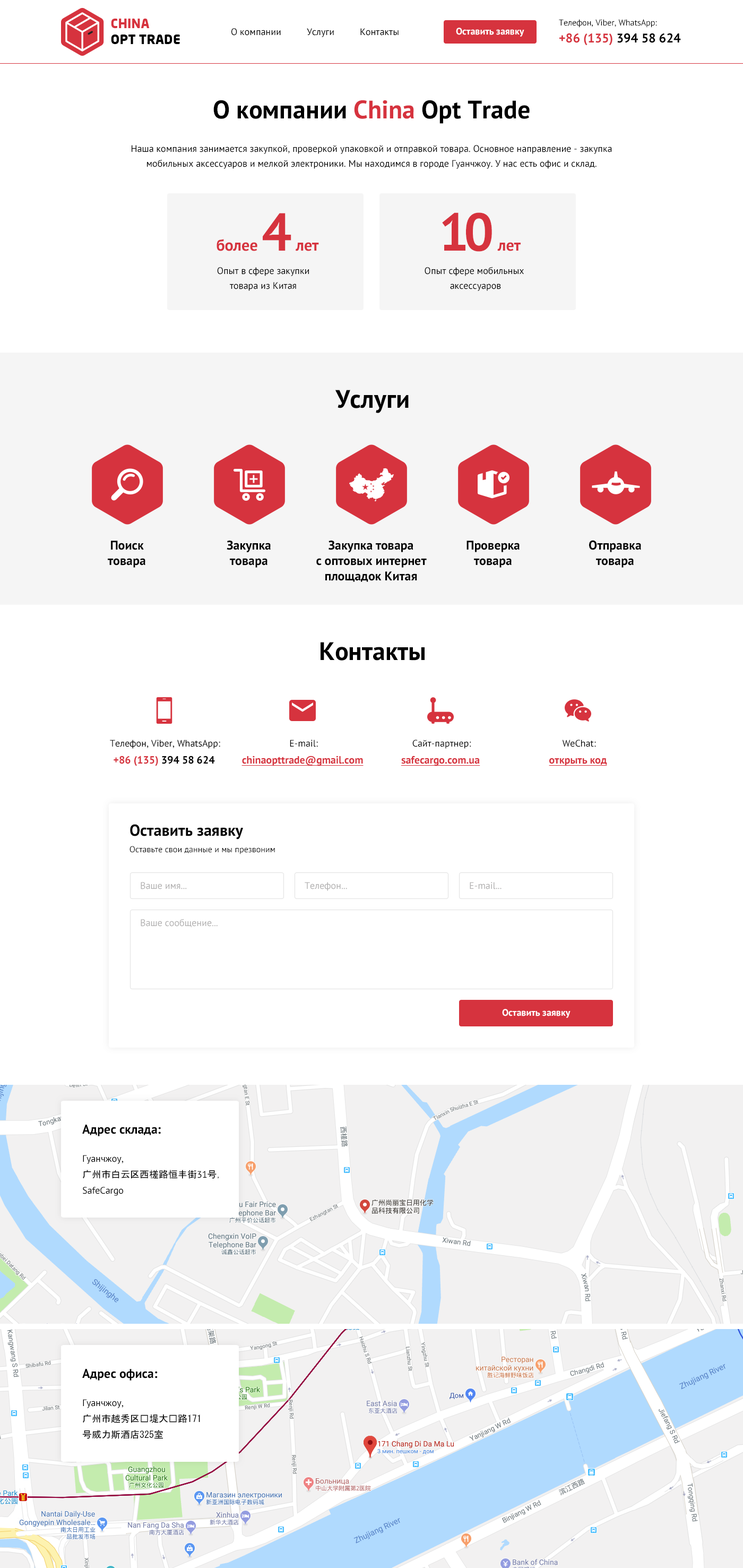
<style>
.page{position:relative;width:743px;height:1568px;background:#ffffff}
.page>*{position:absolute;margin:0}
.t1{font:9.6px "PTSans-Regular";color:#000000}
.t2{font:9.6px "PTSans-Bold";color:#ffffff}
.t3{font:8.5px "PTSans-Regular";color:#000000}
.t4{font:12.7px "PTSans-Bold";color:#000000}
.t5{font:12.7px "PTSans-Bold";color:#d6333e}
.t6{font:25.5px "PTSans-Bold";color:#000000}
.t7{font:25.5px "PTSans-Bold";color:#d6333e}
.t8{font:9.6px/14.9px "PTSans-Regular";color:#010101}
.t9{font:15.9px "PTSans-Bold";color:#d6333e}
.t10{font:53.1px "PTSans-Bold";color:#d6333e}
.t11{font:53.1px "PTSans-Bold";letter-spacing:-0.1em;color:#d6333e}
.t12{font:10.6px "PTSans-Bold";color:#000000}
.t13{font:10.6px "PTSans-Bold";color:#d6333e}
.t14{font:10.6px "PTSans-Bold";color:#d6333e;text-decoration:underline}
.t15{font:15.9px "PTSans-Bold";color:#000000}
.t16{font:8.5px "PTSans-Regular";color:#010101}
.t17{font:9.6px "PTSans-Regular";color:#b1b0b0}
.t18{font:9.6px/15.9px "MS-Gothic";color:#000000}
.t19{font:9.6px/15.9px "PTSans-Regular";color:#000000}
</style>
<div class="page">
<p class="t1" style="left:232px;top:28px;width:167px;height:9px">О компании          Услуги          Контакты</p>
<p class="t2" style="left:456px;top:28px;width:69px;height:9px">Оставить заявку</p>
<p class="t3" style="left:559px;top:19px;width:98px;height:9px">Телефон, Viber, WhatsApp:</p>
<p class="t4" style="left:560px;top:33px;width:121px;height:13px"><span class="t5">+86 (135) </span>394 58 624</p>
<p class="t6" style="left:213px;top:100px;width:317px;height:24px">О компании <span class="t7">China</span> Opt Trade</p>
<p class="t8" style="left:132px;top:145px;width:480px;height:24px;text-align:center">Наша компания занимается закупкой, проверкой упаковкой и отправкой товара. Основное направление - закупка<br>мобильных аксессуаров и мелкой электроники. Мы находимся в городе Гуанчжоу. У нас есть офис и склад.</p>
<p class="t9" style="left:217px;top:213px;width:102px;height:38px">более <span class="t10">4</span> лет</p>
<p class="t9" style="left:442px;top:212px;width:79px;height:40px"><span class="t11">1</span><span class="t10">0</span> лет</p>
<p class="t8" style="left:217px;top:267px;width:92px;height:24px;text-align:center">Опыт в сфере закупки<br>товара из Китая</p>
<p class="t8" style="left:425px;top:267px;width:99px;height:24px;text-align:center">Опыт сфере мобильных <br>аксессуаров</p>
<p class="t6" style="left:335px;top:390px;width:74px;height:23px">Услуги</p>
<p class="t4" style="left:108px;top:541px;width:37px;height:27px;text-align:center">Поиск<br>товара</p>
<p class="t4" style="left:227px;top:541px;width:44px;height:27px;text-align:center">Закупка<br>товара</p>
<p class="t4" style="left:316px;top:541px;width:111px;height:41px;text-align:center">Закупка товара<br>с оптовых интернет<br>площадок Китая</p>
<p class="t4" style="left:467px;top:541px;width:53px;height:27px;text-align:center">Проверка<br>товара</p>
<p class="t4" style="left:589px;top:540px;width:52px;height:28px;text-align:center">Отправка<br>товара</p>
<p class="t6" style="left:321px;top:642px;width:104px;height:19px">Контакты</p>
<p class="t1" style="left:110px;top:740px;width:110px;height:9px">Телефон, Viber, WhatsApp:</p>
<p class="t1" style="left:290px;top:740px;width:28px;height:7px">E-mail:</p>
<p class="t1" style="left:413px;top:740px;width:59px;height:9px">Сайт-партнер:</p>
<p class="t1" style="left:562px;top:740px;width:34px;height:7px">WeChat:</p>
<p class="t12" style="left:114px;top:756px;width:101px;height:10px"><span class="t13">+86 (135) </span>394 58 624</p>
<p class="t14" style="left:242px;top:756px;width:122px;height:10px">chinaopttrade@gmail.com</p>
<p class="t14" style="left:401px;top:756px;width:80px;height:10px">safecargo.com.ua</p>
<p class="t14" style="left:549px;top:758px;width:58px;height:8px">открыть код</p>
<p class="t15" style="left:130px;top:824px;width:113px;height:15px">Оставить заявку</p>
<p class="t16" style="left:130px;top:846px;width:145px;height:8px">Оставьте свои данные и мы презвоним</p>
<p class="t17" style="left:141px;top:882px;width:46px;height:7px">Ваше имя...</p>
<p class="t17" style="left:305px;top:882px;width:42px;height:9px">Телефон...</p>
<p class="t17" style="left:470px;top:882px;width:32px;height:7px">E-mail...</p>
<p class="t17" style="left:141px;top:919px;width:77px;height:9px">Ваше сообщение...</p>
<p class="t2" style="left:502px;top:1009px;width:69px;height:9px">Оставить заявку</p>
<p class="t4" style="left:82px;top:1125px;width:79px;height:11px">Адрес склада:</p>
<p class="t18" style="left:83px;top:1155px;width:136px;height:41px"><span class="t19">Гуанчжоу, <br></span>广州市白云区西槎路恒丰街<span class="t19">31</span>号，<br><span class="t19">SafeCargo</span></p>
<p class="t4" style="left:82px;top:1369px;width:76px;height:12px">Адрес офиса:</p>
<p class="t18" style="left:82px;top:1399px;width:118px;height:40px"><span class="t19">Гуанчжоу, <br></span>广州市越秀区长堤大马路171<br>号威力斯酒店325室</p>
</div>
